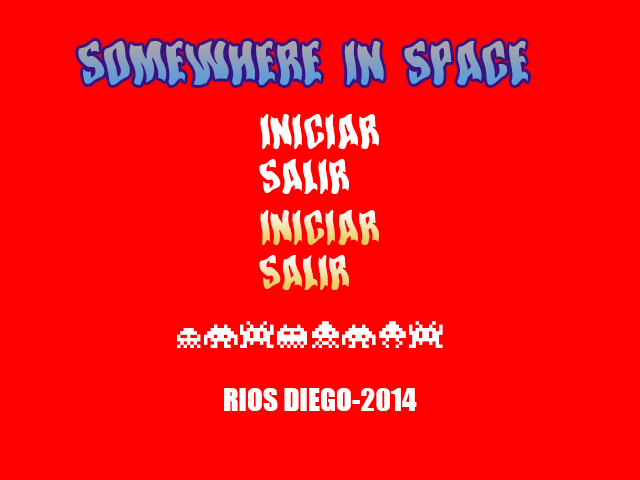
<style>
.page{position:relative;width:640px;height:480px;background:#ff0000}
.page>*{position:absolute;margin:0}
.t1{font:41.7px "SomewhereInSpace"}
.t2{font:33.4px "SomewhereInSpace";color:#ffffff}
.t3{font:33.4px "SomewhereInSpace"}
.t4{font:33.4px "invandersfromspace";color:#ffffff}
.t5{font:29.2px "Impact";color:#ffffff}
</style>
<div class="page">
<p class="t1" style="left:78px;top:41px;width:450px;height:44px">somewhere in space</p>
<p class="t2" style="left:260px;top:114px;width:119px;height:35px">iniciar</p>
<p class="t2" style="left:259px;top:159px;width:90px;height:35px">SAlir</p>
<p class="t3" style="left:260px;top:210px;width:119px;height:35px">iniciar</p>
<p class="t3" style="left:259px;top:255px;width:90px;height:35px">SAlir</p>
<p class="t4" style="left:177px;top:321px;width:266px;height:27px">RIOS DIEO</p>
<p class="t5" style="left:224px;top:388px;width:193px;height:23px">RIOS DIEGO-2014</p>
</div>
